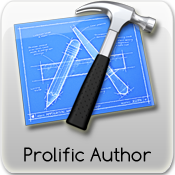
<style>
.page{position:relative;width:175px;height:175px}
.page>*{position:absolute;margin:0}
.t1{font:20px "Comfortaa";color:#000000}
</style>
<div class="page">
<p class="t1" style="left:24px;top:147px;width:127px;height:15px">Prolific Author</p>
</div>
